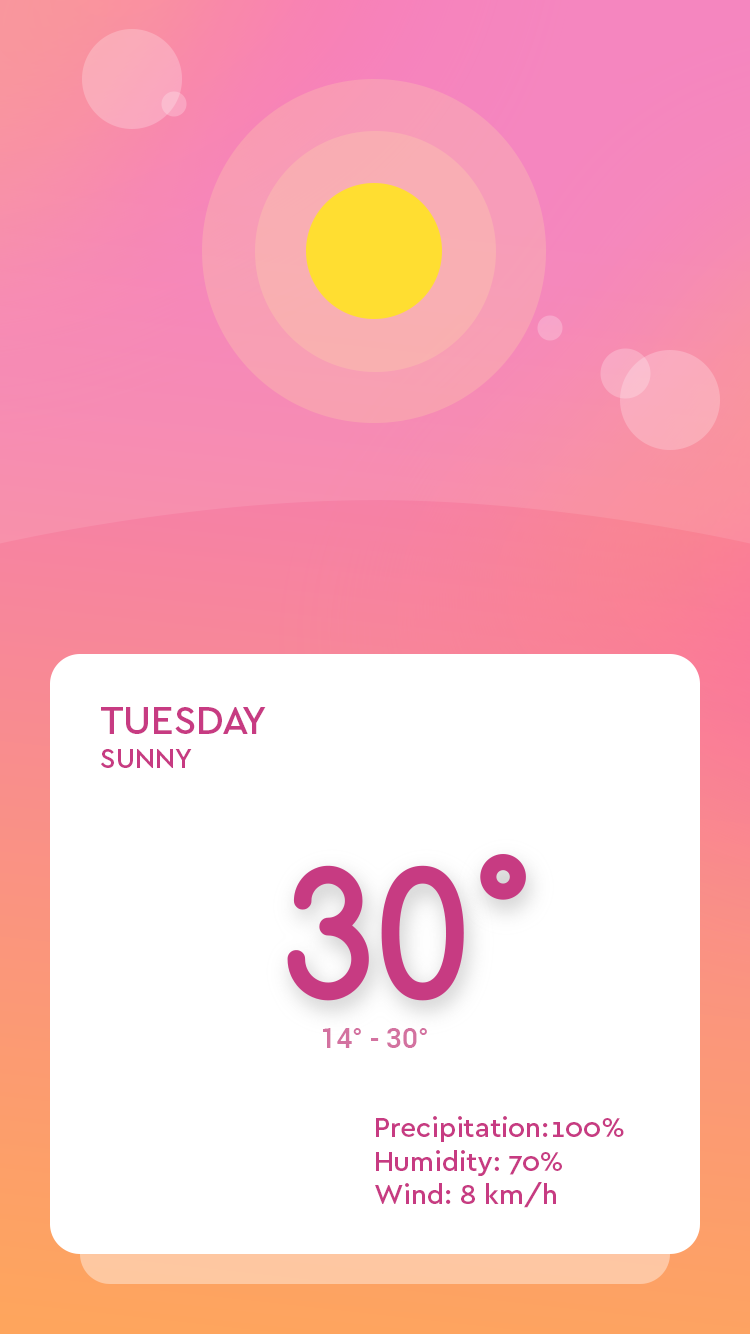
<style>
.page{position:relative;width:750px;height:1334px;background:#ffffff}
.page>*{position:absolute;margin:0}
.t1{font:40px "Cera-ProMedium";color:#c73b82;text-transform:uppercase}
.t2{font:28px "Cera-ProMedium";color:#c73b82;text-transform:uppercase}
.t3{font:28px "Roboto-Medium";color:#d372a0}
.t4{font:28px "Cera-ProMedium";color:#c73b82}
</style>
<div class="page">
<p class="t1" style="left:101px;top:707px;width:165px;height:61px">TUESDAY<br><span class="t2">SUNNY</span></p>
<p class="t3" style="left:323px;top:1028px;width:104px;height:20px">14° - 30°</p>
<p class="t4" style="left:375px;top:1116px;width:249px;height:92px">Precipitation:100%<br>Humidity: 70%<br>Wind: 8 km/h</p>
</div>
